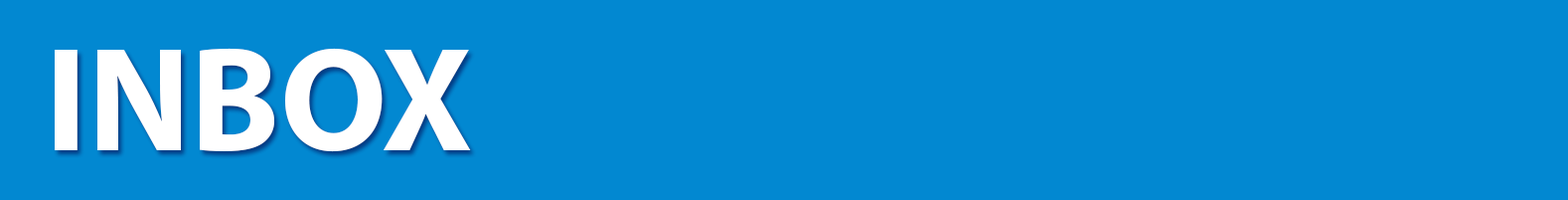
<style>
.page{position:relative;width:1568px;height:200px;background:#0288d1}
.page>*{position:absolute;margin:0}
.t1{font:149px "MyriadPro-Bold";color:#ffffff}
</style>
<div class="page">
<p class="t1" style="left:55px;top:48px;width:416px;height:104px">INBOX</p>
</div>
